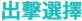
<style>
.page{position:relative;width:82px;height:21px;background:#ffffff}
.page>*{position:absolute;margin:0}
.t1{font:20px "GothicMB101Pr6N-Medium";color:#1cbcbf;font-weight:bold}
</style>
<div class="page">
<p class="t1" style="left:2px;top:0px;width:80px;height:20px">出擊選擇</p>
</div>
